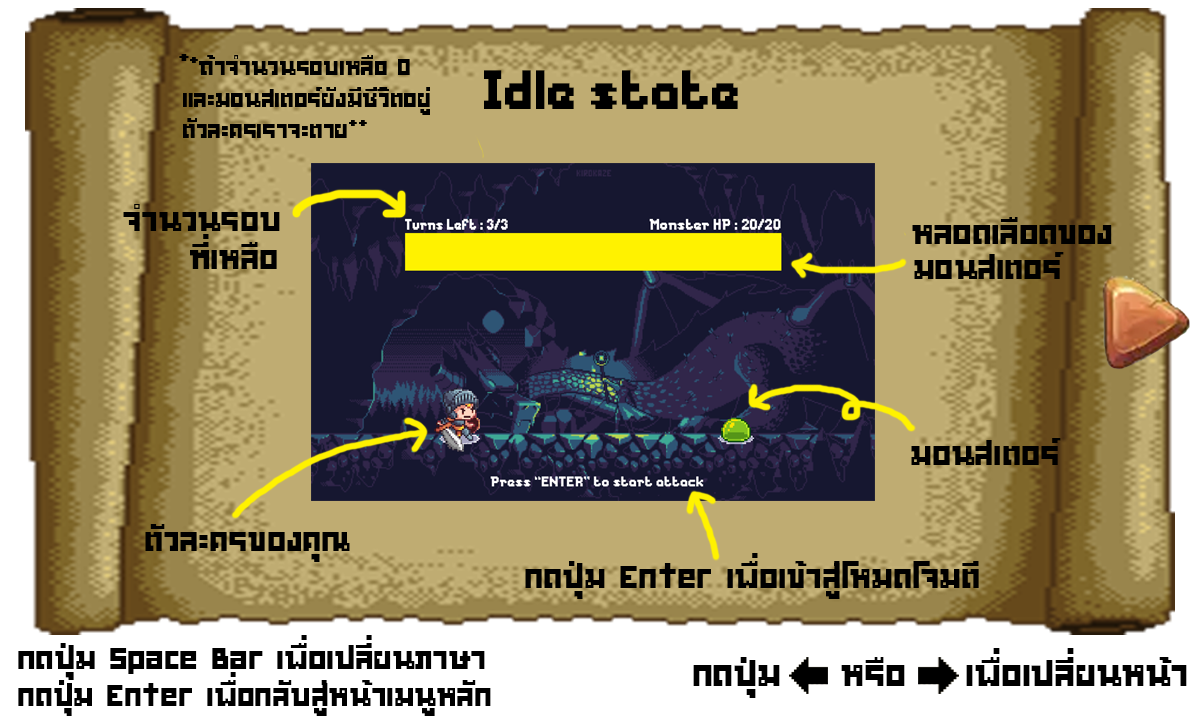
<style>
.page{position:relative;width:1200px;height:720px}
.page>*{position:absolute;margin:0}
.t1{font:40px "2005_iannnnnCPU";color:#000000}
.t2{font:48px "2005_iannnnnCPU";color:#000000}
.t3{font:51.6px "Messe-Duesseldorf";color:#000000}
.t4{font:56px "2005_iannnnnCPU";color:#000000}
.t5{font:53.7px "2005_iannnnnCPU";color:#000000}
.t6{font:60.3px "2005_iannnnnCPU";color:#000000}
.t7{font:52.8px "2005_iannnnnCPU";color:#000000}
</style>
<div class="page">
<p class="t1" style="left:179px;top:54px;width:231px;height:21px"><span class="t2">*</span>*ถ้าจำนวนรอบเหลือ 0</p>
<p class="t3" style="left:484px;top:70px;width:254px;height:39px">Idle state</p>
<p class="t1" style="left:183px;top:87px;width:247px;height:28px">และมอนสเตอร์ยังมีชีวิตอยู่</p>
<p class="t1" style="left:183px;top:118px;width:184px;height:20px">ตัวละครเราจะตาย**</p>
<p class="t4" style="left:123px;top:204px;width:157px;height:27px">จำนวนรอบ</p>
<p class="t4" style="left:912px;top:217px;width:200px;height:27px">หลอดเลือดของ</p>
<p class="t4" style="left:190px;top:234px;width:87px;height:35px">ที่เหลือ</p>
<p class="t4" style="left:914px;top:252px;width:150px;height:27px">มอนสเตอร์</p>
<p class="t4" style="left:911px;top:438px;width:150px;height:27px">มอนสเตอร์</p>
<p class="t4" style="left:145px;top:524px;width:205px;height:38px">ตัวละครของคุณ</p>
<p class="t4" style="left:525px;top:553px;width:454px;height:46px">กดปุ่ม Enter เพื่อเข้าสู่โหมดโจมตี</p>
<p class="t5" style="left:18px;top:635px;width:467px;height:45px">กดปุ่ม Space Bar เพื่อเปลี่ยนภาษา</p>
<p class="t6" style="left:693px;top:648px;width:494px;height:50px">กดปุ่ม    หรือ    เพื่อเปลี่ยนหน้า</p>
<p class="t7" style="left:18px;top:672px;width:473px;height:44px">กดปุ่ม Enter เพื่อกลับสู่หน้าเมนูหลัก</p>
</div>
